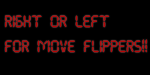
<style>
.page{position:relative;width:150px;height:75px;background:#000000}
.page>*{position:absolute;margin:0}
.t1{font:10.5px "MyDisplaySt";letter-spacing:0.025em;color:#b90505}
</style>
<div class="page">
<p class="t1" style="left:5px;top:15px;width:142px;height:38px">right or left<br><br>for move flippers!!</p>
</div>
